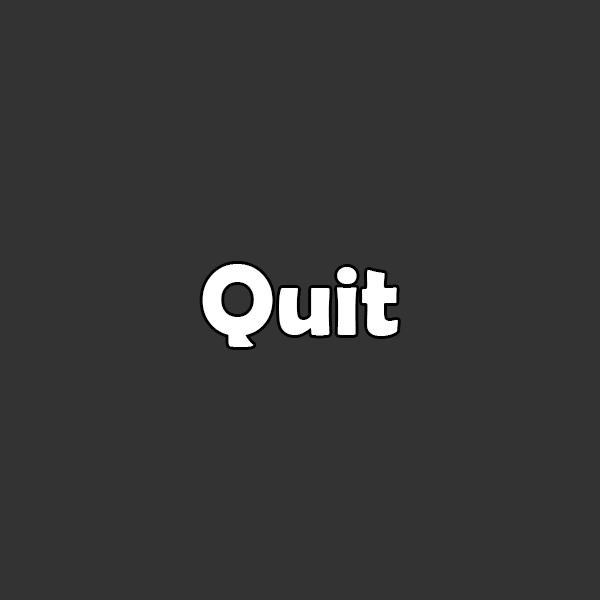
<style>
.page{position:relative;width:600px;height:600px;background:#333333}
.page>*{position:absolute;margin:0}
.t1{font:100px "BerlinSansFBDemi-Bold";color:#ffffff}
</style>
<div class="page">
<p class="t1" style="left:202px;top:264px;width:196px;height:83px">Quit</p>
</div>
